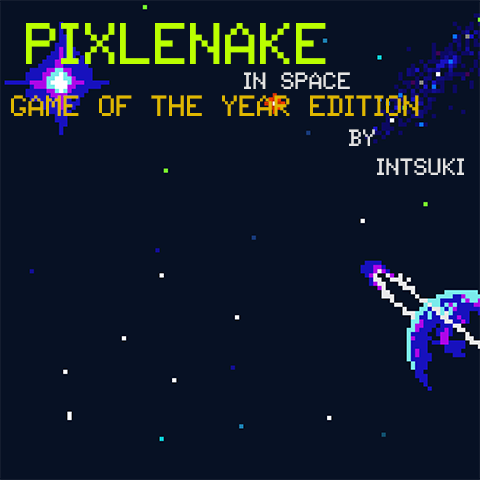
<style>
.page{position:relative;width:480px;height:480px;background:#071124}
.page>*{position:absolute;margin:0}
.t1{font:60px "Tandysoft";color:#bbff00}
.t2{font:24px "Tandysoft";color:#e4e4e4}
.t3{font:30px "Tandysoft";color:#e0b800}
</style>
<div class="page">
<p class="t1" style="left:26px;top:23px;width:300px;height:41px">Pixlenake</p>
<p class="t2" style="left:244px;top:72px;width:106px;height:17px">in space</p>
<p class="t3" style="left:11px;top:95px;width:408px;height:21px">Game of the year edition</p>
<p class="t2" style="left:349px;top:129px;width:115px;height:46px">by<br>  Intsuki</p>
</div>
